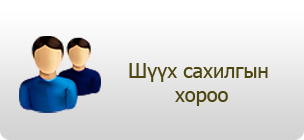
<style>
.page{position:relative;width:304px;height:140px}
.page>*{position:absolute;margin:0}
.t1{font:20px "Tahoma";color:#4e4711}
</style>
<div class="page">
<p class="t1" style="left:129px;top:63px;width:139px;height:43px;text-align:center">Шүүх сахилгын <br>хороо</p>
</div>
